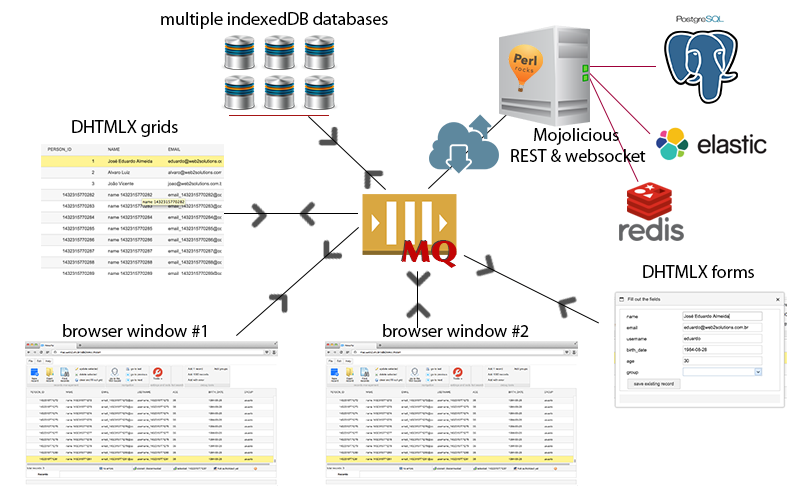
<style>
.page{position:relative;width:800px;height:500px;background:#ffffff}
.page>*{position:absolute;margin:0}
.t1{font:18px "MyriadPro-Regular";color:#000000}
.t2{font:30px "Optima-ExtraBlack";color:#c30505}
</style>
<div class="page">
<p class="t1" style="left:161px;top:12px;width:227px;height:17px">multiple indexedDB databases</p>
<p class="t1" style="left:72px;top:120px;width:106px;height:17px">DHTMLX grids</p>
<p class="t1" style="left:511px;top:128px;width:135px;height:34px;text-align:center">Mojolicious <br>REST &amp; websocket</p>
<p class="t2" style="left:400px;top:240px;width:56px;height:27px">MQ</p>
<p class="t2" style="left:401px;top:241px;width:56px;height:27px">MQ</p>
<p class="t1" style="left:643px;top:265px;width:111px;height:13px">DHTMLX forms</p>
<p class="t1" style="left:63px;top:324px;width:143px;height:13px">browser window #1</p>
<p class="t1" style="left:383px;top:324px;width:146px;height:13px">browser window #2</p>
</div>
